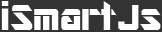
<style>
.page{position:relative;width:162px;height:32px;background:#333333}
.page>*{position:absolute;margin:0}
.t1{font:40.1px "ARDESTINE";color:#ffffff}
</style>
<div class="page">
<p class="t1" style="left:1px;top:1px;width:160px;height:29px">iSmartJs</p>
</div>
